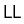
<style>
.page{position:relative;width:24px;height:24px;background:#ffffff}
.page>*{position:absolute;margin:0}
.t1{font:18px "AvenirLTStd-Light";color:#000000}
</style>
<div class="page">
<p class="t1" style="left:4px;top:5px;width:17px;height:13px">LL</p>
</div>
